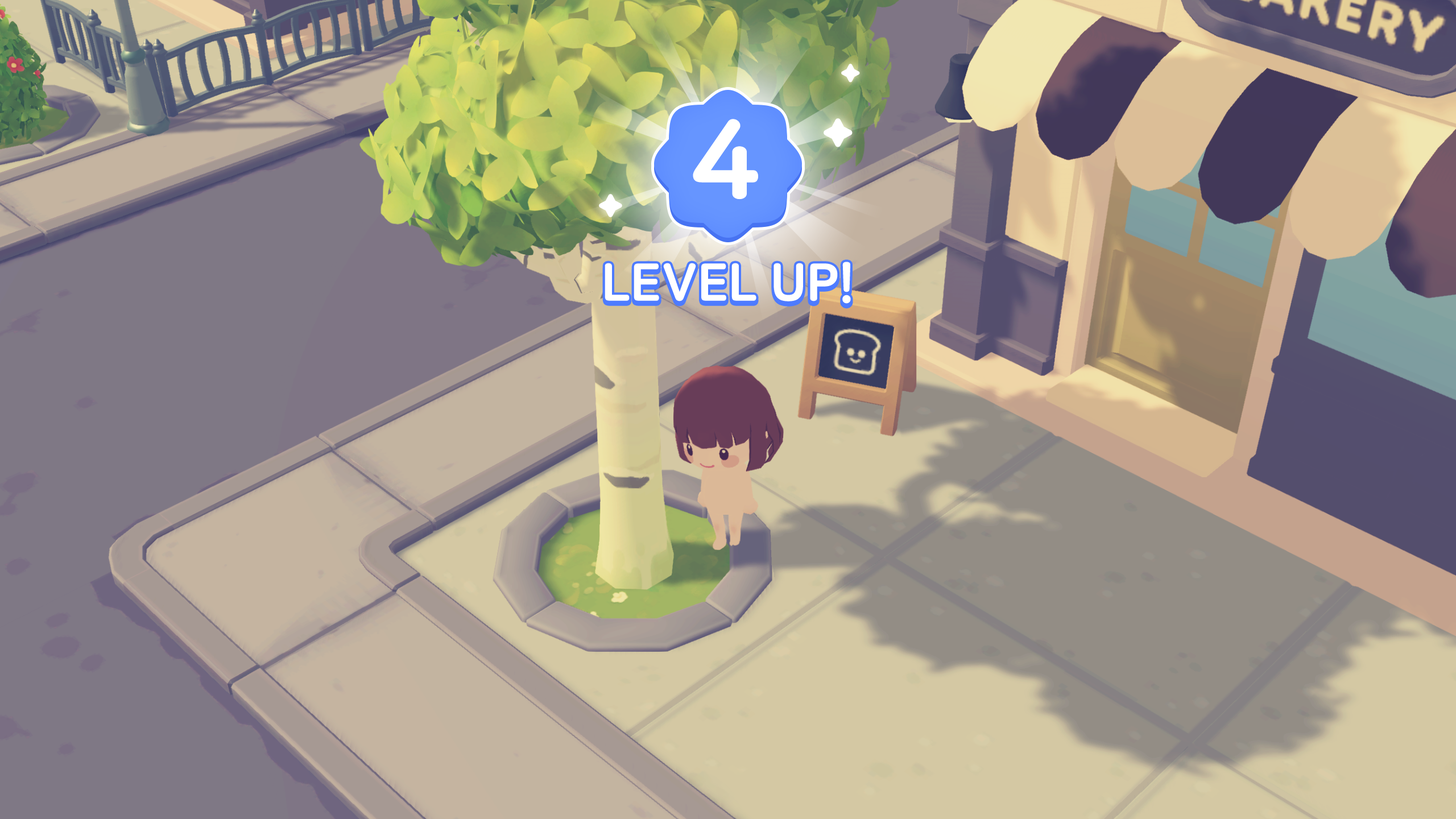
<style>
.page{position:relative;width:1456px;height:819px}
.page>*{position:absolute;margin:0}
.t1{font:109.7px "NanumSquareRoundEB";color:#ffffff;text-transform:uppercase;font-weight:bold}
.t2{font:51.8px "NanumSquareRoundEB";letter-spacing:-0.02em;color:#ffffff;text-transform:uppercase;font-weight:bold}
</style>
<div class="page">
<p class="t1" style="left:693px;top:119px;width:65px;height:81px">4</p>
<p class="t2" style="left:605px;top:262px;width:246px;height:42px">Level Up!</p>
<p class="t2" style="left:605px;top:262px;width:246px;height:42px">Level Up!</p>
</div>
